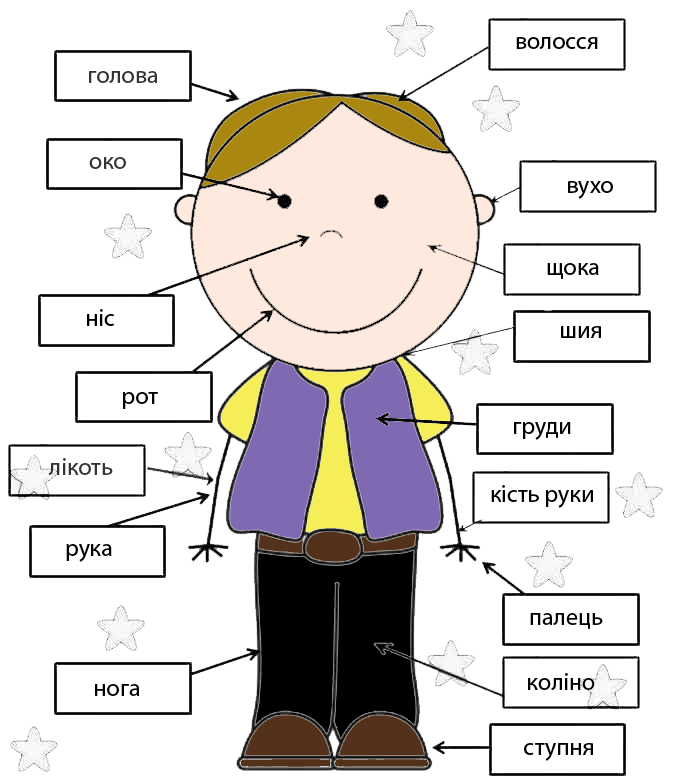
<style>
.page{position:relative;width:676px;height:783px;background:#ffffff}
.page>*{position:absolute;margin:0}
.t1{font:24px "MyriadPro-Regular";color:#000000}
.t2{font:24px "MyriadPro-Regular";color:#333333}
</style>
<div class="page">
<p class="t1" style="left:516px;top:37px;width:82px;height:12px">волосся</p>
<p class="t2" style="left:89px;top:71px;width:69px;height:12px">голова</p>
<p class="t2" style="left:89px;top:157px;width:37px;height:12px">око</p>
<p class="t1" style="left:568px;top:181px;width:45px;height:18px">вухо</p>
<p class="t1" style="left:547px;top:263px;width:52px;height:16px">щока</p>
<p class="t1" style="left:87px;top:309px;width:27px;height:17px">ніс</p>
<p class="t1" style="left:561px;top:326px;width:40px;height:12px">шия</p>
<p class="t1" style="left:123px;top:392px;width:35px;height:17px">рот</p>
<p class="t1" style="left:514px;top:422px;width:57px;height:18px">груди</p>
<p class="t2" style="left:48px;top:458px;width:65px;height:17px">лікоть</p>
<p class="t1" style="left:491px;top:485px;width:102px;height:23px">кість руки</p>
<p class="t1" style="left:66px;top:544px;width:46px;height:18px">рука</p>
<p class="t1" style="left:530px;top:613px;width:73px;height:16px">палець</p>
<p class="t1" style="left:528px;top:673px;width:67px;height:17px">коліно</p>
<p class="t1" style="left:95px;top:684px;width:45px;height:12px">нога</p>
<p class="t1" style="left:524px;top:743px;width:69px;height:18px">ступня</p>
</div>
